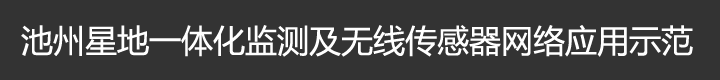
<style>
.page{position:relative;width:720px;height:80px;background:#333333}
.page>*{position:absolute;margin:0}
.t1{font:32px "MicrosoftYaHei";color:#ffffff}
</style>
<div class="page">
<p class="t1" style="left:21px;top:25px;width:672px;height:32px">池州星地一体化监测及无线传感器网络应用示范</p>
</div>
